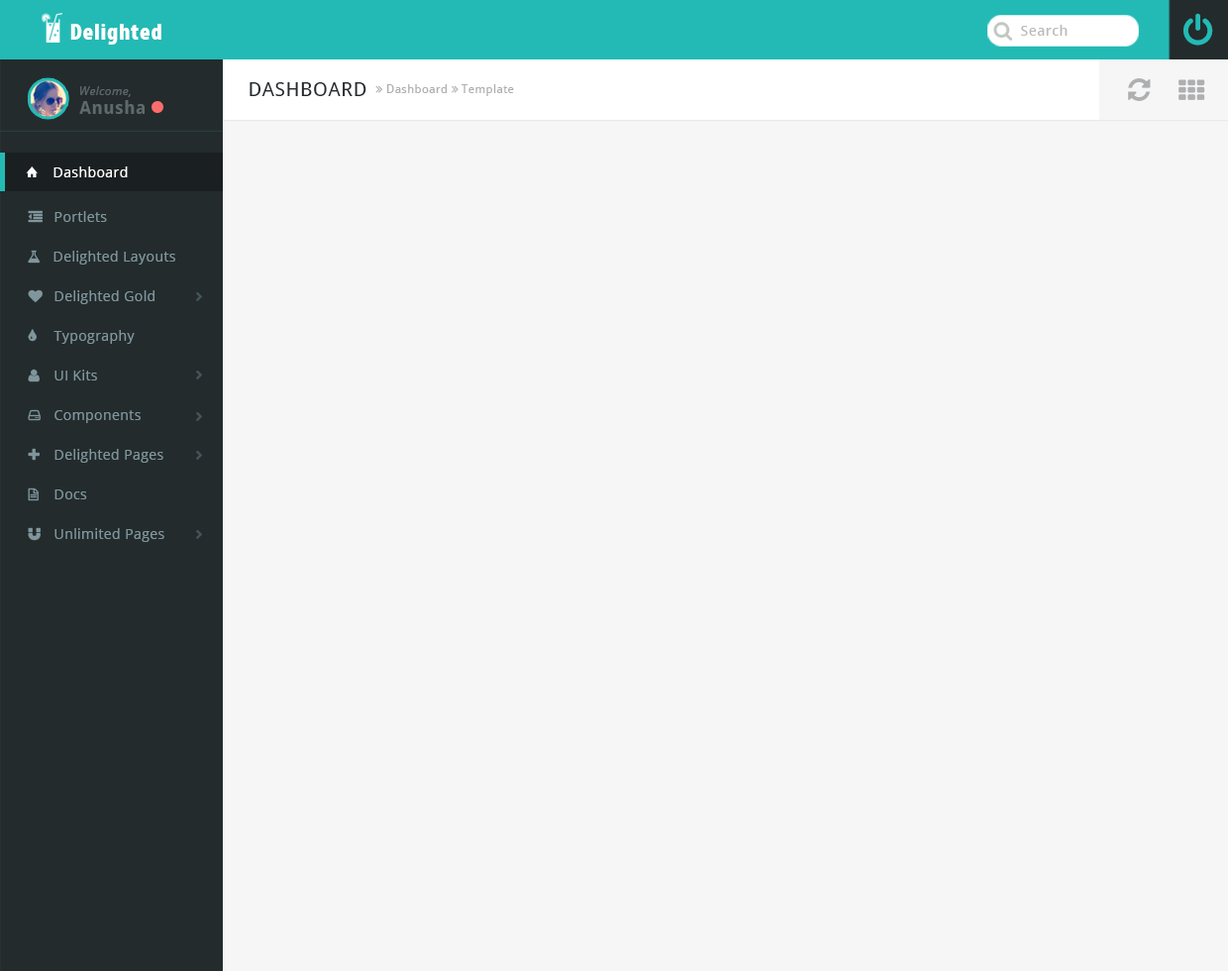
<style>
.page{position:relative;width:1228px;height:971px;background:#f6f6f6}
.page>*{position:absolute;margin:0}
.t1{font:23.8px "MyriadPro-BlackCond";letter-spacing:0.03em;color:#ffffff}
.t2{font:13.9px "OpenSans-Semibold";letter-spacing:0.03em;color:#bbbbbb}
.t3{font:11.9px "OpenSans-Italic";letter-spacing:0.03em;color:#5e696c}
.t4{font:19.8px "DroidSans";letter-spacing:0.03em;color:#232b2d}
.t5{font:17.8px "DroidSans-Bold";letter-spacing:0.03em;color:#5e696c}
.t6{font:13.9px "OpenSans";letter-spacing:0.03em;color:#ffffff}
.t7{font:13.9px "OpenSans";letter-spacing:0.03em;color:#80969c}
</style>
<div class="page">
<p class="t1" style="left:70px;top:24px;width:91px;height:21px">Delighted</p>
<p class="t2" style="left:1021px;top:25px;width:47px;height:11px">Search</p>
<p class="t3" style="left:80px;top:86px;width:51px;height:11px">Welcome,</p>
<p class="t4" style="left:250px;top:82px;width:117px;height:14px">DASHBOARD</p>
<p class="t5" style="left:79px;top:100px;width:66px;height:14px">Anusha</p>
<p class="t6" style="left:53px;top:166px;width:75px;height:11px">Dashboard</p>
<p class="t7" style="left:54px;top:211px;width:53px;height:11px">Portlets</p>
<p class="t7" style="left:53px;top:251px;width:122px;height:13px">Delighted Layouts</p>
<p class="t7" style="left:54px;top:290px;width:101px;height:14px">Delighted Gold</p>
<p class="t7" style="left:53px;top:330px;width:82px;height:14px">Typography</p>
<p class="t7" style="left:54px;top:369px;width:43px;height:11px">UI Kits</p>
<p class="t7" style="left:54px;top:410px;width:87px;height:13px">Components</p>
<p class="t7" style="left:54px;top:449px;width:109px;height:14px">Delighted Pages</p>
<p class="t7" style="left:54px;top:489px;width:33px;height:10px">Docs</p>
<p class="t7" style="left:54px;top:528px;width:110px;height:14px">Unlimited Pages</p>
</div>
